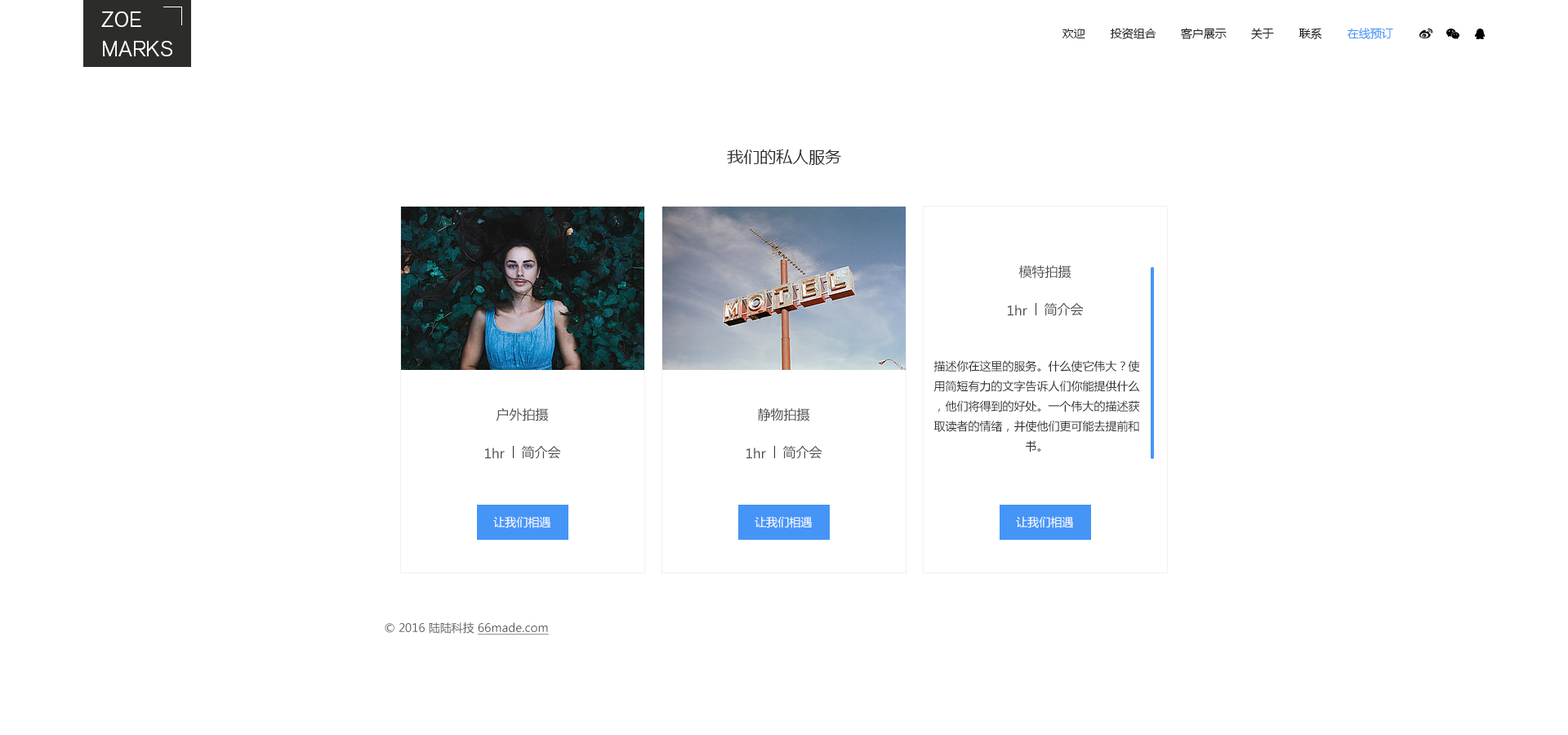
<style>
.page{position:relative;width:1568px;height:735px;background:#ffffff}
.page>*{position:absolute;margin:0}
.t1{font:21.2px/29.4px "AkzidenzGroteskBQ-LightSC";color:#ffffff}
.t2{font:11.4px "MicrosoftYaHei";color:#1c1c1c}
.t3{font:11.4px "MicrosoftYaHei";color:#4595f7}
.t4{font:16.3px "MicrosoftYaHei";color:#2c2c2b}
.t5{font:13.1px "MicrosoftYaHei";color:#544d4d}
.t6{font:11.4px "MicrosoftYaHei";color:#322c2b}
.t7{font:11.4px "MicrosoftYaHei";color:#ffffff}
.t8{font:11.4px "MicrosoftYaHei";color:#5e5d5d}
.t9{font:11.4px "MicrosoftYaHei";color:#5e5d5d;text-decoration:underline}
</style>
<div class="page">
<p class="t1" style="left:101px;top:11px;width:71px;height:45px">ZOE<br>MARKS</p>
<p class="t2" style="left:1062px;top:29px;width:23px;height:9px">欢迎</p>
<p class="t2" style="left:1110px;top:28px;width:46px;height:11px">投资组合</p>
<p class="t2" style="left:1181px;top:28px;width:46px;height:11px">客户展示</p>
<p class="t2" style="left:1251px;top:28px;width:23px;height:11px">关于</p>
<p class="t2" style="left:1298px;top:28px;width:24px;height:11px">联系</p>
<p class="t3" style="left:1347px;top:28px;width:46px;height:11px">在线预订</p>
<p class="t4" style="left:727px;top:149px;width:114px;height:16px">我们的私人服务</p>
<p class="t5" style="left:1018px;top:265px;width:53px;height:13px">模特拍摄</p>
<p class="t5" style="left:1008px;top:305px;width:19px;height:11px">1hr</p>
<p class="t5" style="left:1044px;top:303px;width:40px;height:13px">简介会</p>
<p class="t6" style="left:933px;top:360px;width:207px;height:92px;text-align:center">描述你在这里的服务。什么使它伟大？使用简短有力的文字告诉人们你能提供什么，他们将得到的好处。一个伟大的描述获取读者的情绪，并使他们更可能去提前和书。</p>
<p class="t5" style="left:496px;top:408px;width:53px;height:13px">户外拍摄</p>
<p class="t5" style="left:758px;top:408px;width:52px;height:13px">静物拍摄</p>
<p class="t5" style="left:485px;top:448px;width:20px;height:11px">1hr</p>
<p class="t5" style="left:521px;top:446px;width:40px;height:13px">简介会</p>
<p class="t5" style="left:746px;top:448px;width:20px;height:11px">1hr</p>
<p class="t5" style="left:782px;top:446px;width:40px;height:13px">简介会</p>
<p class="t7" style="left:493px;top:516px;width:57px;height:12px">让我们相遇</p>
<p class="t7" style="left:755px;top:516px;width:57px;height:12px">让我们相遇</p>
<p class="t7" style="left:1016px;top:516px;width:57px;height:12px">让我们相遇</p>
<p class="t8" style="left:385px;top:622px;width:164px;height:13px">© 2016 陆陆科技 <span class="t9">66made.com</span></p>
</div>
